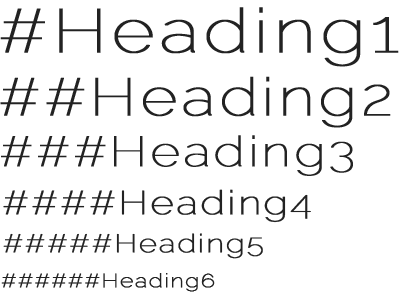
<style>
.page{position:relative;width:400px;height:297px;background:#ffffff}
.page>*{position:absolute;margin:0}
.t1{font:61.3px "Raleway-Thin";letter-spacing:0.05em;color:#222222;font-weight:bold;scale:1.2 1}
.t2{font:52.4px "Raleway-Thin";letter-spacing:0.05em;color:#222222;font-weight:bold;scale:1.2 1}
.t3{font:42.2px "Raleway-Thin";letter-spacing:0.05em;color:#222222;font-weight:bold;scale:1.2 1}
.t4{font:33.2px "Raleway-Thin";letter-spacing:0.05em;color:#222222;font-weight:bold;scale:1.2 1}
.t5{font:25.6px "Raleway-Thin";letter-spacing:0.05em;color:#222222;font-weight:bold;scale:1.2 1}
.t6{font:19.2px "Raleway-Thin";letter-spacing:0.05em;color:#222222;font-weight:bold;scale:1.2 1}
</style>
<div class="page">
<p class="t1" style="left:0px;top:7px;width:399px;height:60px">#Heading1</p>
<p class="t2" style="left:0px;top:76px;width:391px;height:52px">##Heading2</p>
<p class="t3" style="left:1px;top:135px;width:352px;height:41px">###Heading3</p>
<p class="t4" style="left:3px;top:189px;width:308px;height:34px">####Heading4</p>
<p class="t5" style="left:3px;top:233px;width:260px;height:26px">#####Heading5</p>
<p class="t6" style="left:1px;top:273px;width:214px;height:19px">######Heading6</p>
</div>
